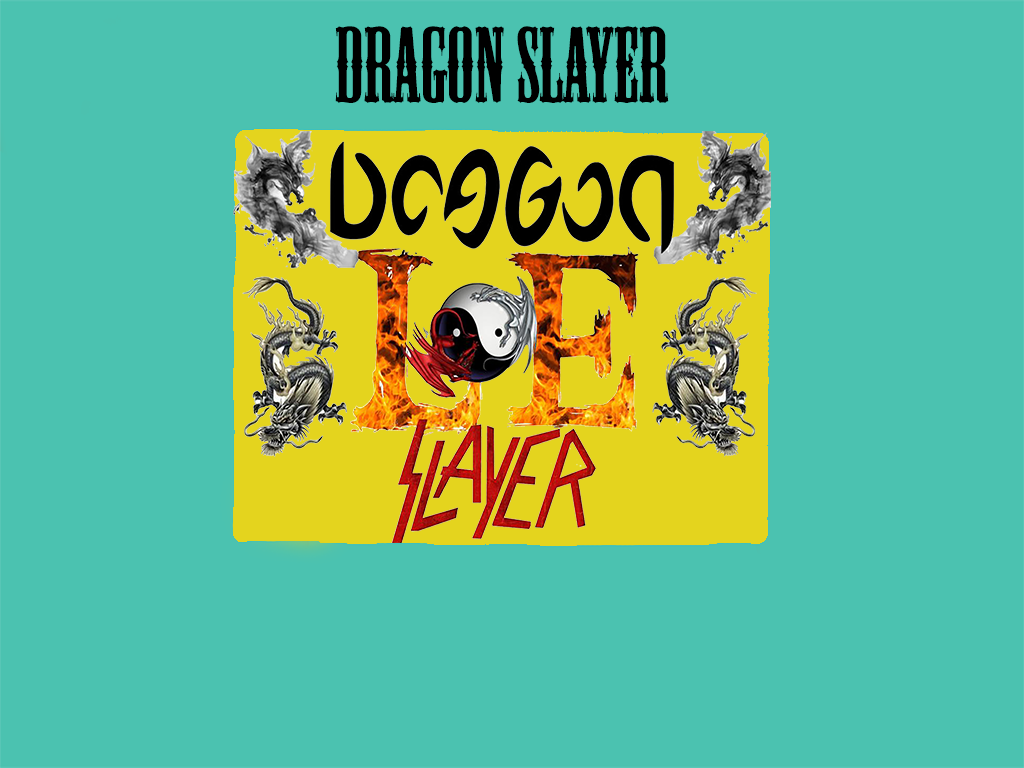
<style>
.page{position:relative;width:1024px;height:768px;background:#4bc2b0}
.page>*{position:absolute;margin:0}
.t1{font:100px "MesquiteStd";color:#000000}
</style>
<div class="page">
<p class="t1" style="left:335px;top:26px;width:334px;height:77px">Dragon Slayer</p>
</div>
